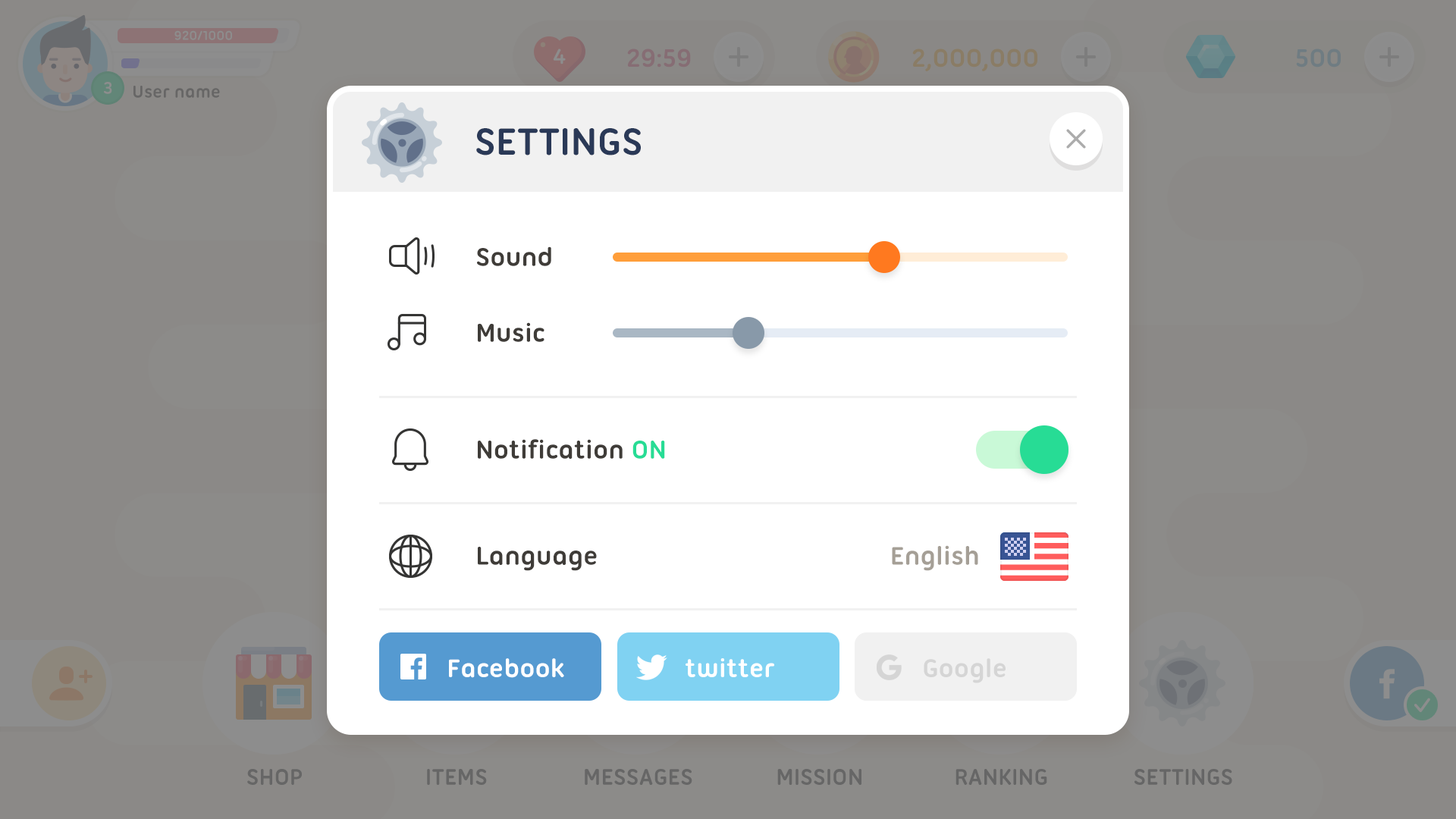
<style>
.page{position:relative;width:1456px;height:819px;background:#ffffff}
.page>*{position:absolute;margin:0}
.t1{font:40.9px "UbuntuTitling-Bold";color:#2a3957;text-transform:uppercase}
.t2{font:27.3px "UbuntuTitling-Bold";color:#3f3c38}
.t3{font:27.3px "UbuntuTitling-Bold";color:#27dc95}
.t4{font:27.3px "UbuntuTitling-Bold";color:#a59f96}
.t5{font:27.3px "UbuntuTitling-Bold";color:#ffffff}
.t6{font:27.3px "UbuntuTitling-Bold";color:#d5d5d5}
</style>
<div class="page">
<p class="t1" style="left:476px;top:128px;width:165px;height:27px">Settings</p>
<p class="t2" style="left:477px;top:246px;width:74px;height:20px">Sound</p>
<p class="t2" style="left:478px;top:322px;width:66px;height:20px">Music</p>
<p class="t2" style="left:478px;top:439px;width:187px;height:20px">Notification <span class="t3">ON</span></p>
<p class="t4" style="left:892px;top:545px;width:86px;height:26px">English</p>
<p class="t2" style="left:478px;top:547px;width:119px;height:24px">Language</p>
<p class="t5" style="left:449px;top:658px;width:115px;height:20px">Facebook</p>
<p class="t5" style="left:686px;top:658px;width:88px;height:19px">twitter</p>
<p class="t6" style="left:924px;top:658px;width:82px;height:25px">Google</p>
<p class="t6" style="left:924px;top:658px;width:82px;height:25px">Google</p>
</div>
